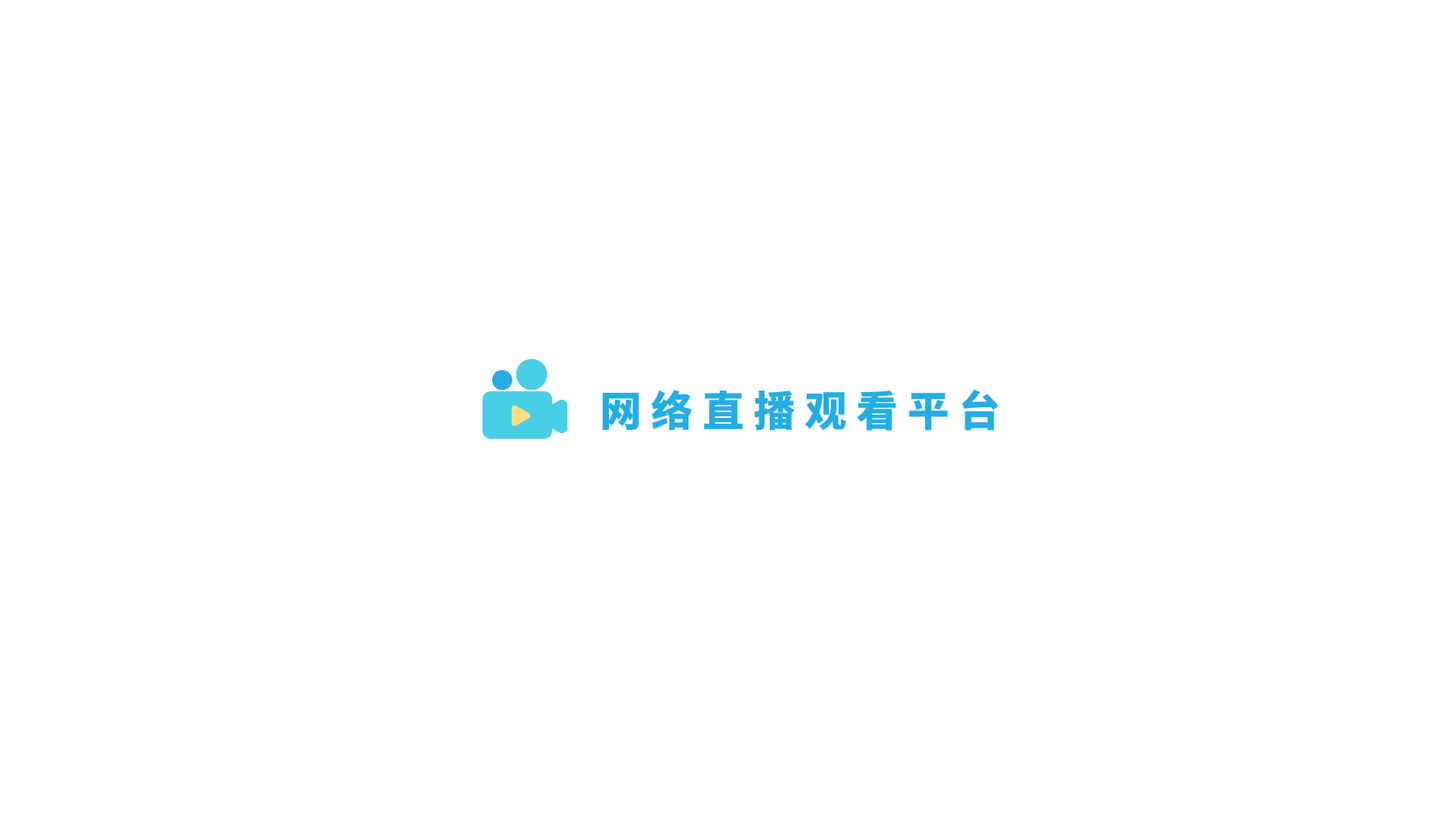
<style>
.page{position:relative;width:1456px;height:819px;background:#ffffff}
.page>*{position:absolute;margin:0}
.t1{font:41.7px "SourceHanSansSC-Heavy";color:#23ade5}
</style>
<div class="page">
<p class="t1" style="left:602px;top:389px;width:397px;height:42px">网 络 直 播 观 看 平 台</p>
</div>
